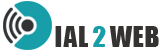
<style>
.page{position:relative;width:160px;height:50px;background:#ffffff}
.page>*{position:absolute;margin:0}
.t1{font:26.7px "Impact";letter-spacing:0.04em;color:#343331}
.t2{font:26.7px "Impact";letter-spacing:0.04em;color:#179ea8}
</style>
<div class="page">
<p class="t1" style="left:55px;top:26px;width:104px;height:21px">IAL <span class="t2">2 </span>WEB</p>
</div>
